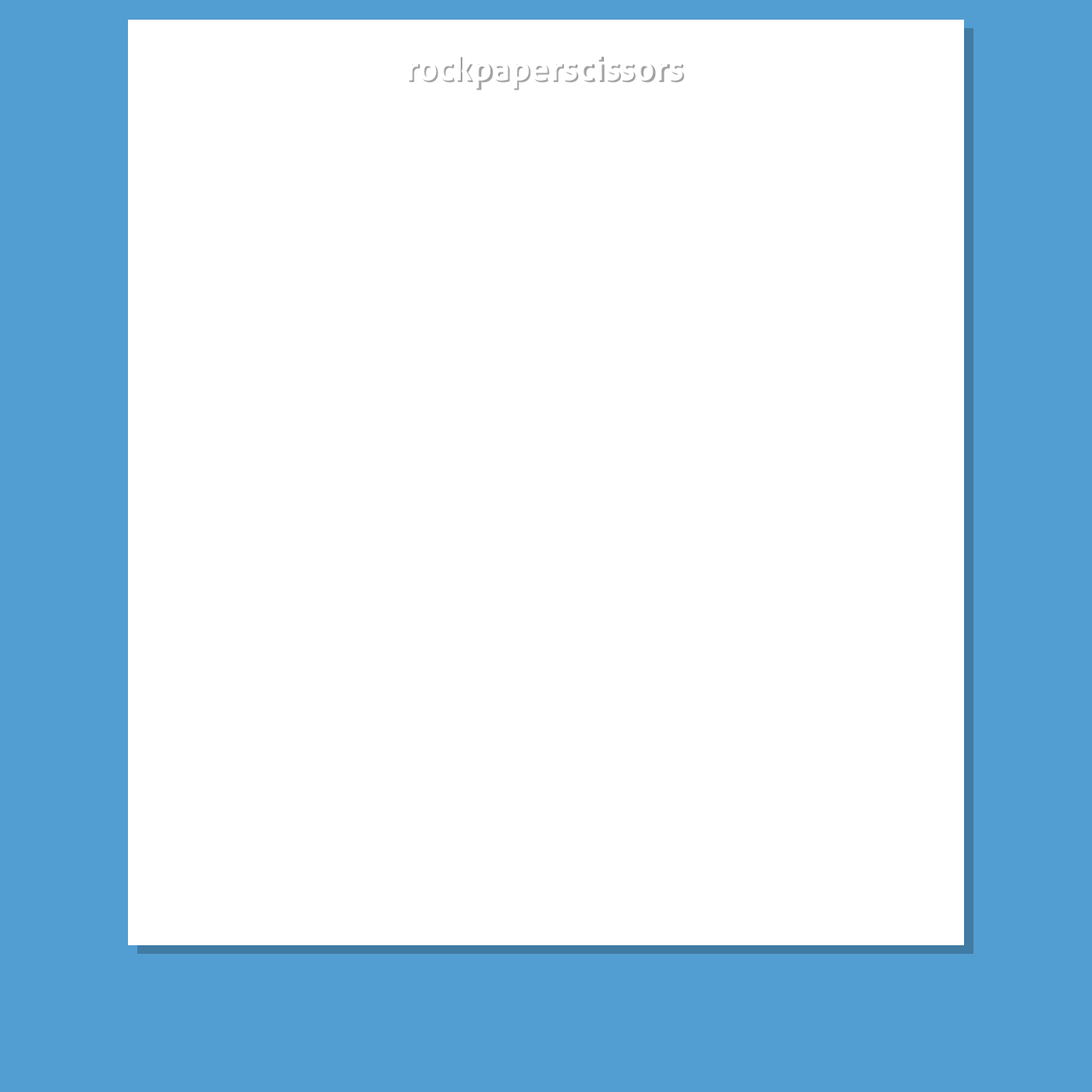
<style>
.page{position:relative;width:1092px;height:1092px;background:#ffffff}
.page>*{position:absolute;margin:0}
.t1{font:34px "Aller-Bold"}
</style>
<div class="page">
<p class="t1" style="left:409px;top:56px;width:275px;height:34px">rockpaperscissors</p>
</div>
